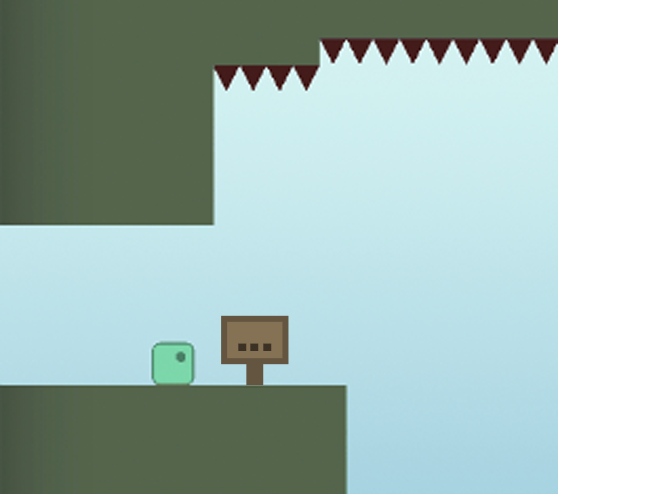
<style>
.page{position:relative;width:658px;height:494px}
.page>*{position:absolute;margin:0}
.t1{font:37.9px "Arial-Black";color:#3b3124}
</style>
<div class="page">
<p class="t1" style="left:238px;top:343px;width:34px;height:8px">...</p>
</div>
